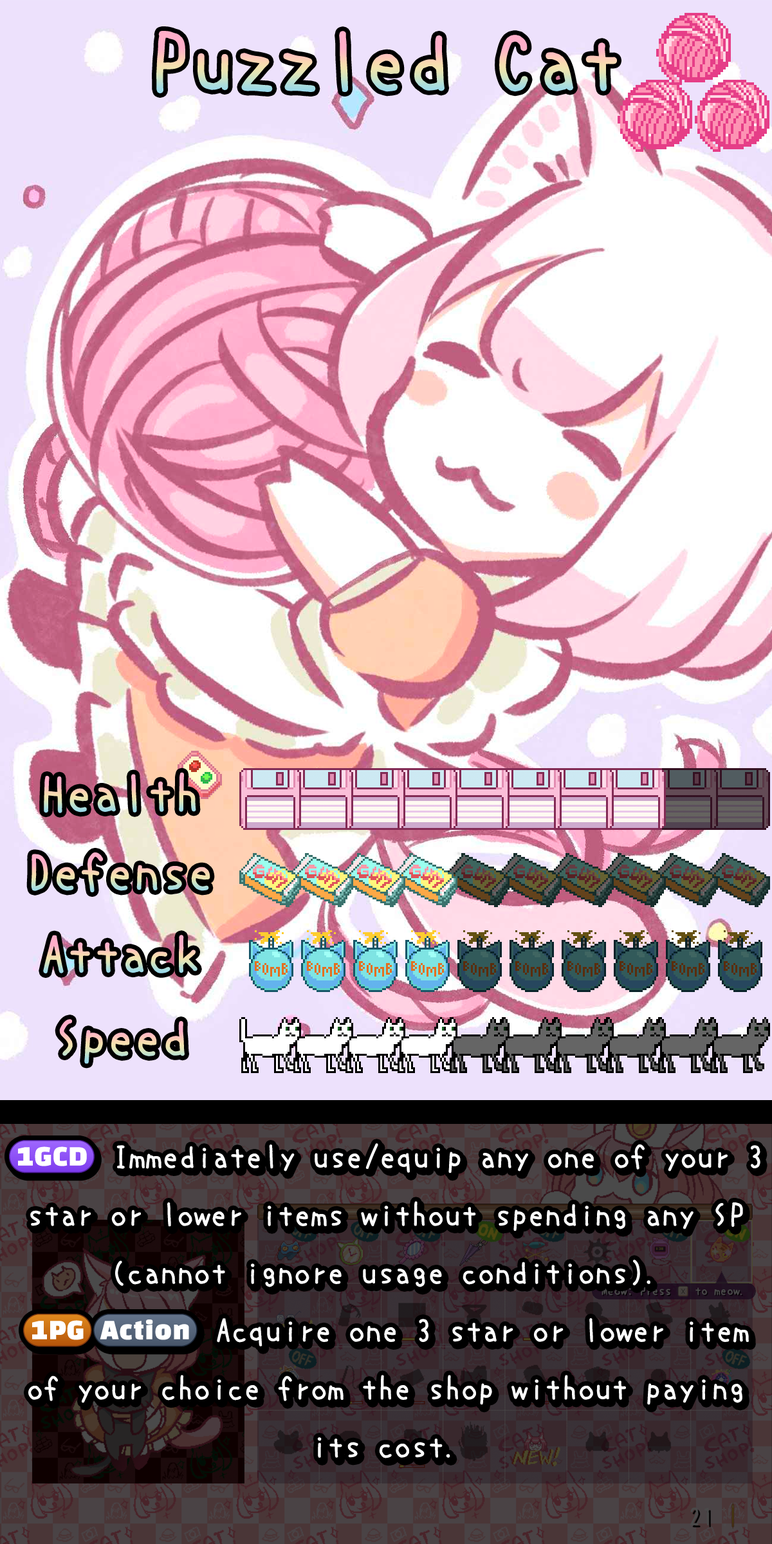
<style>
.page{position:relative;width:772px;height:1544px}
.page>*{position:absolute;margin:0}
.t1{font:92.7px "uzura_font"}
.t2{font:57.9px/57.9px "uzura_font";letter-spacing:-0.005em;color:#fefefe}
.t3{font:33.8px/57.9px "stoogedings-Regular";color:#fefefe}
.t4{font:57.9px/57.9px "stoogedings-Regular";color:#fefefe}
</style>
<div class="page">
<p class="t1" style="left:44px;top:772px;width:152px;height:41px">Health</p>
<p class="t1" style="left:31px;top:853px;width:179px;height:39px">Defense</p>
<p class="t1" style="left:43px;top:935px;width:155px;height:39px">Attack</p>
<p class="t1" style="left:59px;top:1019px;width:126px;height:45px">Speed</p>
<p class="t2" style="left:9px;top:1140px;width:752px;height:319px;text-align:center"><span class="t3">(1GCD)</span> Immediately use/equip any one of your 3 star or lower items without spending any SP (cannot ignore usage conditions).<br><span class="t4">(1PG)(Action)</span> Acquire one 3 star or lower item of your choice from the shop without paying its cost.</p>
</div>
